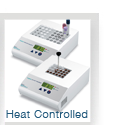
<style>
.page{position:relative;width:124px;height:125px;background:#ffffff}
.page>*{position:absolute;margin:0}
.t1{font:11px "HelveticaNeue-Light";letter-spacing:0.05em;color:#20587b}
</style>
<div class="page">
<p class="t1" style="left:6px;top:110px;width:82px;height:8px">Heat Controlled</p>
</div>
